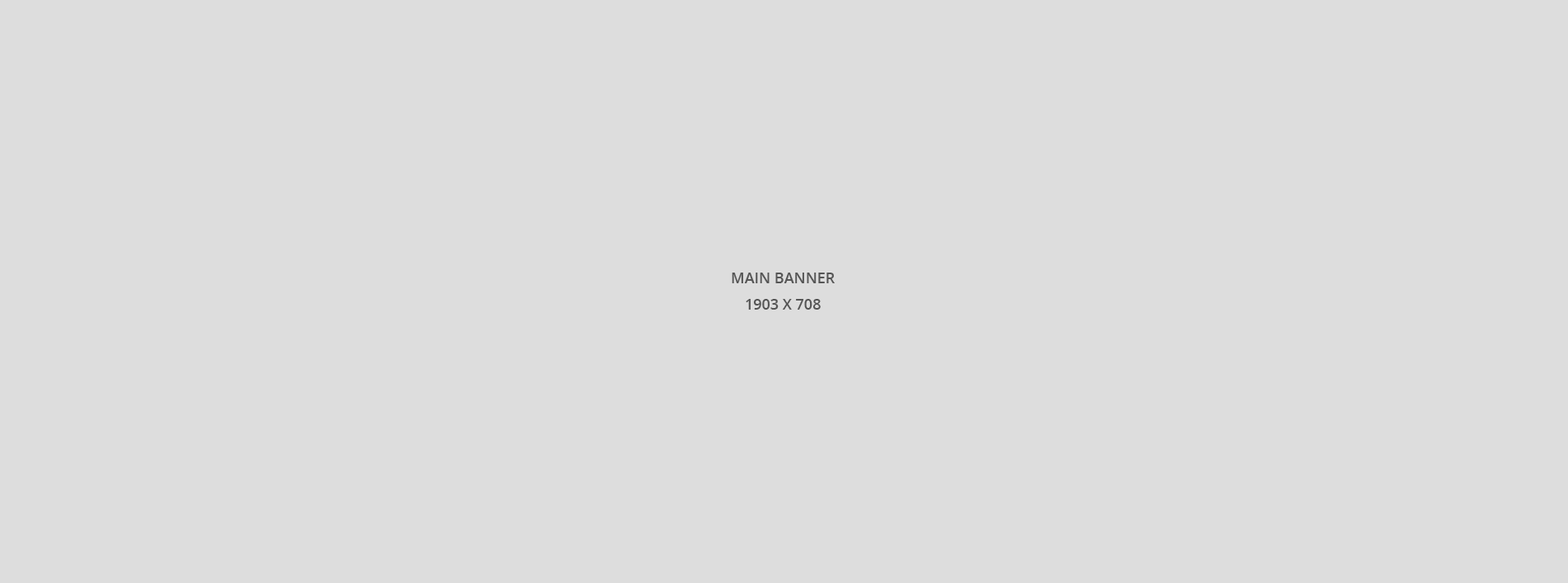
<style>
.page{position:relative;width:1568px;height:583px;background:#dddddd}
.page>*{position:absolute;margin:0}
.t1{font:14.8px "OpenSans-Semibold";color:#555555;text-transform:uppercase}
</style>
<div class="page">
<p class="t1" style="left:732px;top:273px;width:103px;height:37px;text-align:center">main banner<br>1903 x 708</p>
</div>
